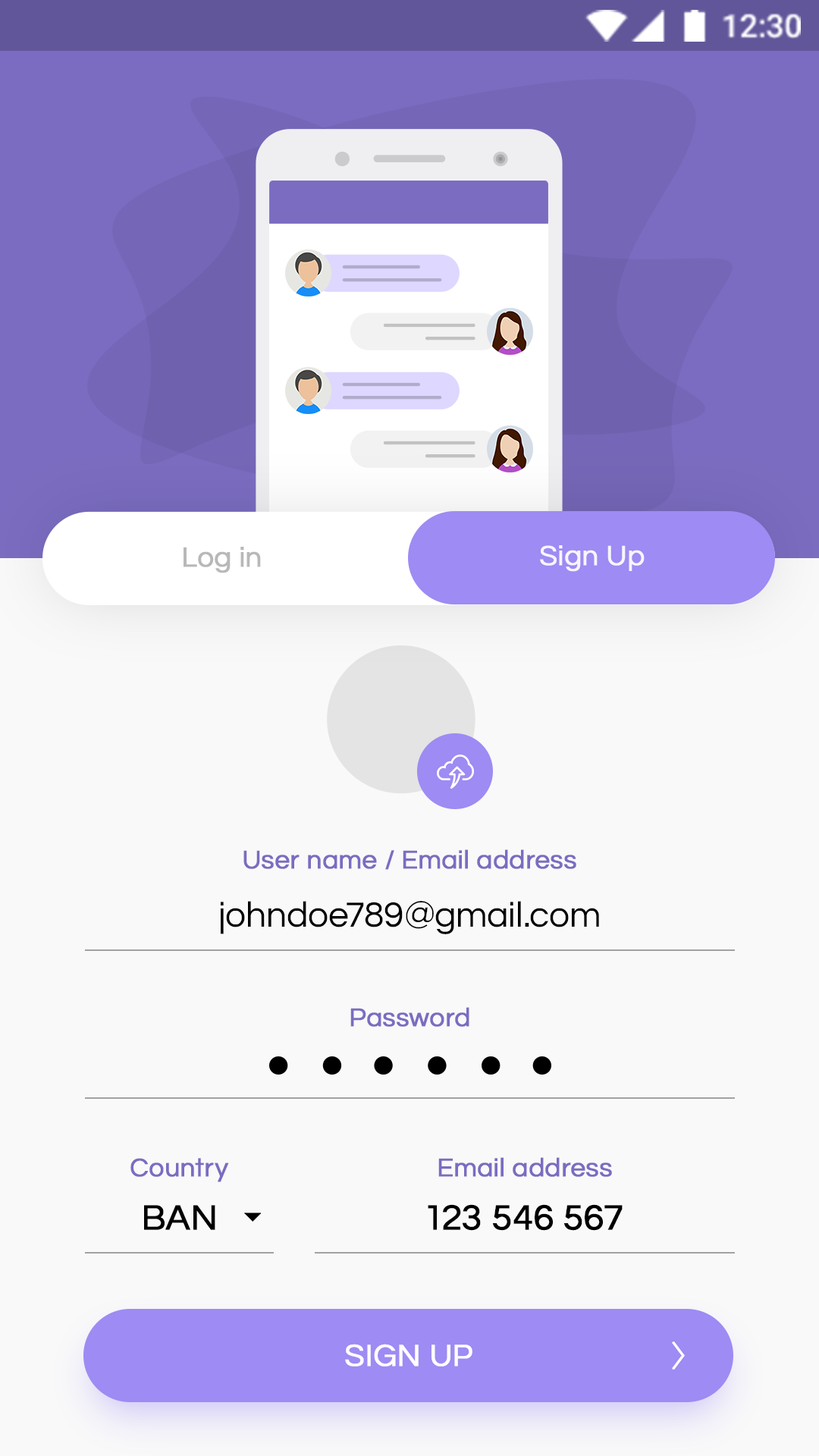
<style>
.page{position:relative;width:819px;height:1456px;background:#f9f9f9}
.page>*{position:absolute;margin:0}
.t1{font:28.8px "Questrial-Regular";letter-spacing:0.005em;color:#ffffff;font-weight:bold}
.t2{font:28.8px "Questrial-Regular";letter-spacing:0.005em;color:#b8b8b8;font-weight:bold}
.t3{font:26.5px "Questrial-Regular";letter-spacing:0.005em;color:#7b6cc1;font-weight:bold}
.t4{font:36.4px "Questrial-Regular";letter-spacing:0.005em;color:#000000}
.t5{font:36.4px "Questrial-Regular";letter-spacing:0.005em;color:#000000;font-weight:bold}
.t6{font:31.8px "Questrial-Regular";letter-spacing:0.005em;color:#ffffff;font-weight:bold}
</style>
<div class="page">
<p class="t1" style="left:540px;top:545px;width:105px;height:27px;opacity:0.9">Sign Up</p>
<p class="t2" style="left:184px;top:547px;width:77px;height:26px">Log in</p>
<p class="t3" style="left:243px;top:849px;width:333px;height:21px">User name / Email address</p>
<p class="t4" style="left:221px;top:901px;width:378px;height:33px">johndoe789@gmail.com</p>
<p class="t3" style="left:350px;top:1007px;width:119px;height:20px">Password</p>
<p class="t3" style="left:130px;top:1158px;width:99px;height:24px">Country</p>
<p class="t3" style="left:438px;top:1157px;width:174px;height:20px">Email address</p>
<p class="t5" style="left:144px;top:1205px;width:71px;height:25px">BAN</p>
<p class="t5" style="left:428px;top:1204px;width:195px;height:27px">123 546 567</p>
<p class="t6" style="left:345px;top:1344px;width:127px;height:22px">SIGN UP</p>
</div>
